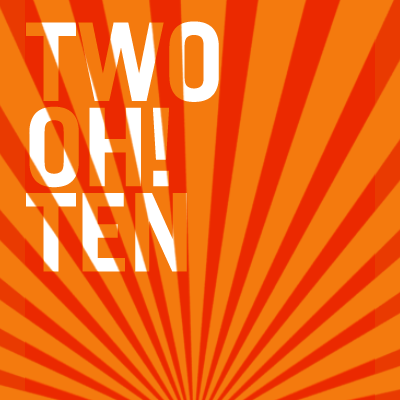
<style>
.page{position:relative;width:400px;height:400px;background:#f47a0e}
.page>*{position:absolute;margin:0}
.t1{font:108.3px/85.3px "TradeGothicLT-Bold";letter-spacing:-0.02em;text-transform:uppercase}
</style>
<div class="page">
<p class="t1" style="left:26px;top:21px;width:193px;height:251px">two<br>oh!<br>ten</p>
</div>
